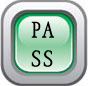
<style>
.page{position:relative;width:88px;height:86px}
.page>*{position:absolute;margin:0}
.t1{font:24px "DFFangSongStd-W6";color:#000000}
</style>
<div class="page">
<p class="t1" style="left:31px;top:21px;width:23px;height:46px">PA<br>SS</p>
</div>
